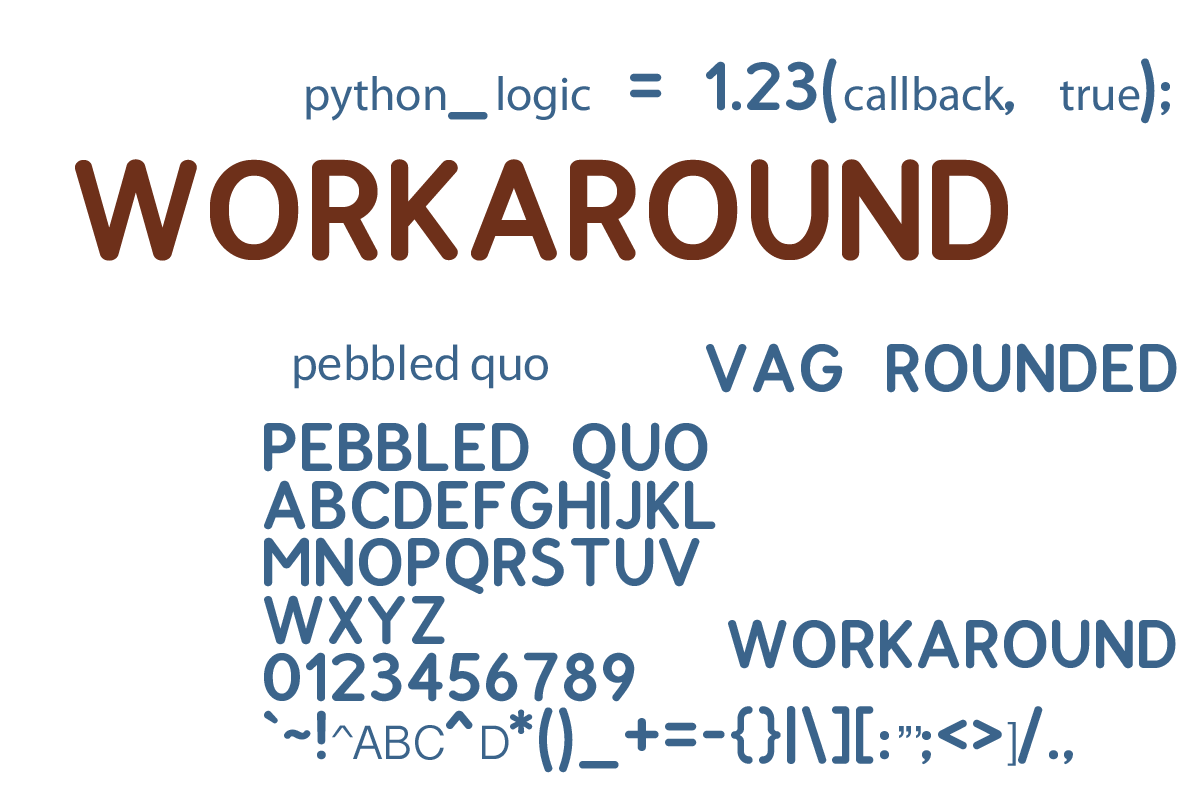
<style>
.page{position:relative;width:1200px;height:800px;background:#ffffff}
.page>*{position:absolute;margin:0}
.t1{font:48px "MyriadPro-Regular";color:#3b648b}
.t2{font:48px "Workaround-RoundRoman";color:#3b648b}
.t3{font:100px "Workaround-RoundRoman";color:#6e301a}
.t4{font:48px "Lato-Regular";color:#3b648b}
.t5{font:48px "TeluguSangamMN";color:#3b648b}
</style>
<div class="page">
<p class="t1" style="left:306px;top:58px;width:864px;height:66px">python<span class="t2">_</span>logic<span class="t2"> = 1.23(</span>callback<span class="t2">, </span>true<span class="t2">);</span></p>
<p class="t3" style="left:75px;top:159px;width:933px;height:102px">WORKAROUND</p>
<p class="t4" style="left:294px;top:344px;width:254px;height:45px">pebbled quo</p>
<p class="t2" style="left:706px;top:343px;width:471px;height:50px">VAG ROUNDED</p>
<p class="t2" style="left:264px;top:422px;width:809px;height:351px">PEBBLED QUO<br>ABCDEFGHIJKL<br>MNOPQRSTUV<br>WXYZ<br>0123456789<br>`~!<span class="t5">@#$%</span>^<span class="t5">&amp;</span>*()_+=-{}|\][:<span class="t5">”’</span>;&lt;&gt;<span class="t5">?</span>/.,</p>
<p class="t2" style="left:728px;top:619px;width:448px;height:50px">WORKAROUND</p>
</div>
